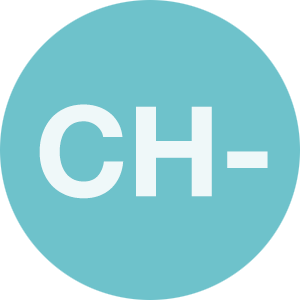
<style>
.page{position:relative;width:300px;height:300px;background:#6ec2cb}
.page>*{position:absolute;margin:0}
.t1{font:125px "HelveticaNeue-Bold";color:#eff8f9}
.t2{font:133.3px "HelveticaNeue-Bold";color:#eff8f9}
</style>
<div class="page">
<p class="t1" style="left:39px;top:104px;width:229px;height:95px">CH<span class="t2">-</span></p>
</div>
